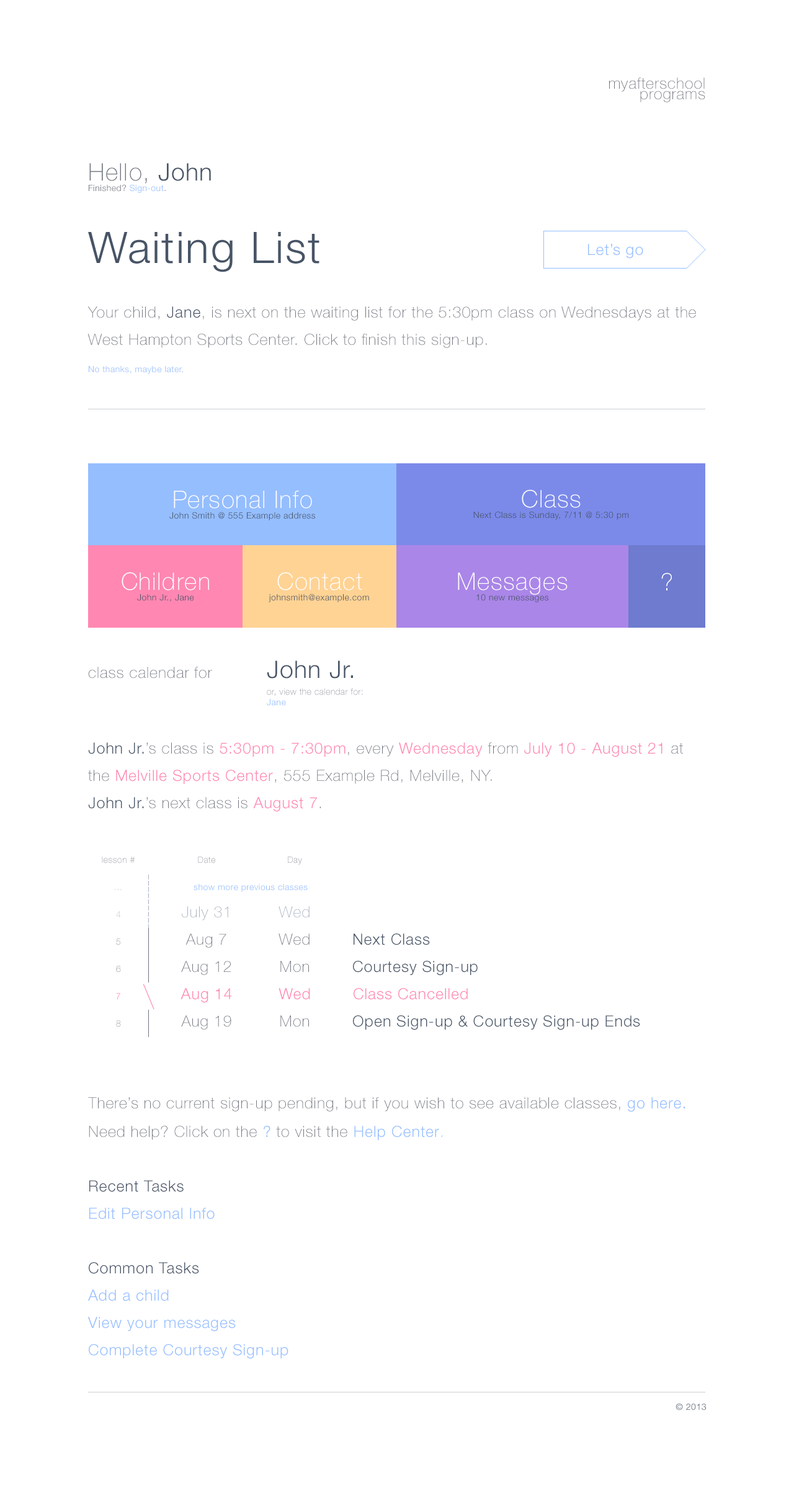
<style>
.page{position:relative;width:794px;height:1501px;background:#ffffff}
.page>*{position:absolute;margin:0}
.t1{font:15.5px/10.5px "HelveticaNeueLTStd-Th";letter-spacing:0.039em;color:#71767f}
.t2{font:8.7px/10.5px "HelveticaNeueLTStd-Lt";letter-spacing:0.039em;color:#71767f}
.t3{font:24.2px/10.5px "HelveticaNeueLTStd-Th";letter-spacing:0.039em;color:#71767f}
.t4{font:24.2px/10.5px "HelveticaNeueLTStd-Lt";letter-spacing:0.039em;color:#475466}
.t5{font:8.7px/10.5px "HelveticaNeueLTStd-Lt";letter-spacing:0.039em;color:#95beff}
.t6{font:15.5px/27.3px "HelveticaNeueLTStd-Th";letter-spacing:0.039em;color:#71767f}
.t7{font:43.4px/27.3px "HelveticaNeueLTStd-Lt";letter-spacing:0.039em;color:#475466}
.t8{font:15.5px/27.3px "HelveticaNeueLTStd-Lt";letter-spacing:0.039em;color:#475467}
.t9{font:8.7px/27.3px "HelveticaNeueLTStd-Lt";letter-spacing:0.039em;color:#95beff}
.t10{font:15.5px "HelveticaNeueLTStd-Lt";letter-spacing:0.039em;color:#95beff}
.t11{font:8.7px/10.5px "HelveticaNeueLTStd-Lt";letter-spacing:0.039em;color:#475467}
.t12{font:24.2px/27.3px "HelveticaNeueLTStd-Th";letter-spacing:0.039em;color:#ffffff}
.t13{font:24.2px/10.5px "HelveticaNeueLTStd-Th";letter-spacing:0.039em;color:#ffffff}
.t14{font:24.2px "HelveticaNeueLTStd-Th";letter-spacing:0.039em;color:#ffffff}
.t15{font:8.7px/10.5px "HelveticaNeueLTStd-Th";letter-spacing:0.039em;color:#71767f}
.t16{font:24.2px/27.3px "HelveticaNeueLTStd-Lt";letter-spacing:0.039em;color:#475467}
.t17{font:15.5px/27.3px "HelveticaNeueLTStd-Lt";letter-spacing:0.039em;color:#ff87b2}
.t18{font:8.7px "HelveticaNeueLTStd-Th";letter-spacing:0.039em}
.t19{font:8.7px "HelveticaNeueLTStd-Lt";letter-spacing:0.039em;color:#95beff}
.t20{font:8.7px/27.3px "HelveticaNeueLTStd-Th";letter-spacing:0.039em;color:#71767f}
.t21{font:8.7px/27.3px "HelveticaNeueLTStd-Th";letter-spacing:0.039em;color:#aab2bf}
.t22{font:8.7px/27.3px "HelveticaNeueLTStd-Lt";letter-spacing:0.039em;color:#ff87b2}
.t23{font:15.5px "HelveticaNeueLTStd-Th";letter-spacing:0.039em;color:#aab2bf}
.t24{font:15.5px "HelveticaNeueLTStd-Th";letter-spacing:0.039em;color:#71767f}
.t25{font:15.5px "HelveticaNeueLTStd-Lt";letter-spacing:0.039em;color:#475467}
.t26{font:15.5px "HelveticaNeueLTStd-Lt";letter-spacing:0.039em;color:#ff87b2}
.t27{font:15.5px/27.3px "HelveticaNeueLTStd-Lt";letter-spacing:0.039em;color:#95beff}
.t28{font:15.5px/27.3px "HelveticaNeueLTStd-Th";letter-spacing:0.039em;color:#95beff}
.t29{font:8.7px "HelveticaNeueLTStd-Lt";letter-spacing:0.039em;color:#475467}
</style>
<div class="page">
<p class="t1" style="left:609px;top:78px;width:96px;height:24px;text-align:right">myafterschool<br>programs</p>
<p class="t2" style="left:89px;top:163px;width:122px;height:30px"><span class="t3">Hello, </span><span class="t4">John<br></span>Finished? <span class="t5">Sign-out</span>.</p>
<p class="t6" style="left:87px;top:232px;width:609px;height:142px"><span class="t7">Waiting List<br><br></span>Your child, <span class="t8">Jane</span>, is next on the waiting list for the 5:30pm class on Wednesdays at the West Hampton Sports Center. Click to finish this sign-up.<br><span class="t9">No thanks, maybe later.</span></p>
<p class="t10" style="left:588px;top:244px;width:55px;height:15px">Let’s go</p>
<p class="t11" style="left:169px;top:491px;width:146px;height:30px;text-align:center"><span class="t12">Personal Info<br></span>John Smith @ 555 Example address</p>
<p class="t11" style="left:473px;top:490px;width:156px;height:30px;text-align:center"><span class="t13">Class<br></span>Next Class is Sunday, 7/11 @ 5:30 pm</p>
<p class="t11" style="left:122px;top:572px;width:87px;height:30px;text-align:center"><span class="t13">Children<br></span>John Jr., Jane</p>
<p class="t11" style="left:269px;top:572px;width:100px;height:30px;text-align:center"><span class="t13">Contact<br></span>johnsmith@example.com</p>
<p class="t11" style="left:458px;top:573px;width:110px;height:29px;text-align:center"><span class="t13">Messages<br></span>10 new messages</p>
<p class="t14" style="left:661px;top:573px;width:11px;height:18px">?</p>
<p class="t15" style="left:88px;top:661px;width:275px;height:45px"><span class="t6">class calendar for           </span><span class="t16">John Jr.<br><br></span>        or, view the calendar for:<br><span class="t5">        Jane</span></p>
<p class="t6" style="left:88px;top:743px;width:595px;height:69px"><span class="t8">John Jr.</span>’s class is <span class="t17">5:30pm - 7:30pm</span>, every <span class="t17">Wednesday</span> from <span class="t17">July 10 - August 21</span> at the <span class="t17">Melville Sports Center</span>, 555 Example Rd, Melville, NY.<br><span class="t8">John Jr.</span>’s next class is <span class="t17">August 7</span>.</p>
<p class="t18" style="left:102px;top:857px;width:33px;height:7px">lesson #</p>
<p class="t18" style="left:198px;top:857px;width:17px;height:7px">Date</p>
<p class="t18" style="left:288px;top:857px;width:14px;height:8px">Day</p>
<p class="t18" style="left:115px;top:889px;width:7px;height:1px">...</p>
<p class="t19" style="left:194px;top:884px;width:114px;height:8px">show more previous classes</p>
<p class="t20" style="left:116px;top:911px;width:5px;height:116px;text-align:center"><span class="t21">4<br></span>5<br>6<br><span class="t22">7<br></span>8</p>
<p class="t23" style="left:182px;top:906px;width:46px;height:15px">July 31</p>
<p class="t23" style="left:279px;top:906px;width:31px;height:12px">Wed</p>
<p class="t24" style="left:186px;top:934px;width:40px;height:14px">Aug 7</p>
<p class="t24" style="left:279px;top:934px;width:31px;height:12px">Wed</p>
<p class="t25" style="left:354px;top:934px;width:76px;height:12px">Next Class</p>
<p class="t24" style="left:181px;top:961px;width:50px;height:14px">Aug 12</p>
<p class="t24" style="left:280px;top:961px;width:29px;height:12px">Mon</p>
<p class="t25" style="left:353px;top:961px;width:125px;height:15px">Courtesy Sign-up</p>
<p class="t26" style="left:181px;top:988px;width:51px;height:15px">Aug 14</p>
<p class="t26" style="left:279px;top:988px;width:31px;height:12px">Wed</p>
<p class="t26" style="left:354px;top:988px;width:114px;height:12px">Class Cancelled</p>
<p class="t24" style="left:181px;top:1016px;width:50px;height:14px">Aug 19</p>
<p class="t24" style="left:280px;top:1016px;width:29px;height:11px">Mon</p>
<p class="t25" style="left:353px;top:1016px;width:287px;height:15px">Open Sign-up &amp; Courtesy Sign-up Ends</p>
<p class="t24" style="left:88px;top:1098px;width:597px;height:14px">There’s no current sign-up pending, but if you wish to see available classes, <span class="t10">go here.</span></p>
<p class="t27" style="left:87px;top:1126px;width:355px;height:233px"><span class="t6">Need help? Click on the </span>? <span class="t6">to visit the </span>Help Center<span class="t28">.<br><br></span><span class="t8">Recent Tasks<br></span>Edit Personal Info<br><br><span class="t8">Common Tasks<br></span>Add a child<br>View your messages<br>Complete Courtesy Sign-up</p>
<p class="t29" style="left:676px;top:1403px;width:30px;height:8px">© 2013</p>
</div>
